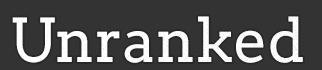
<style>
.page{position:relative;width:322px;height:70px;background:#333333}
.page>*{position:absolute;margin:0}
.t1{font:60px "Arvo";color:#ffffff}
</style>
<div class="page">
<p class="t1" style="left:12px;top:16px;width:291px;height:47px">Unranked</p>
</div>
